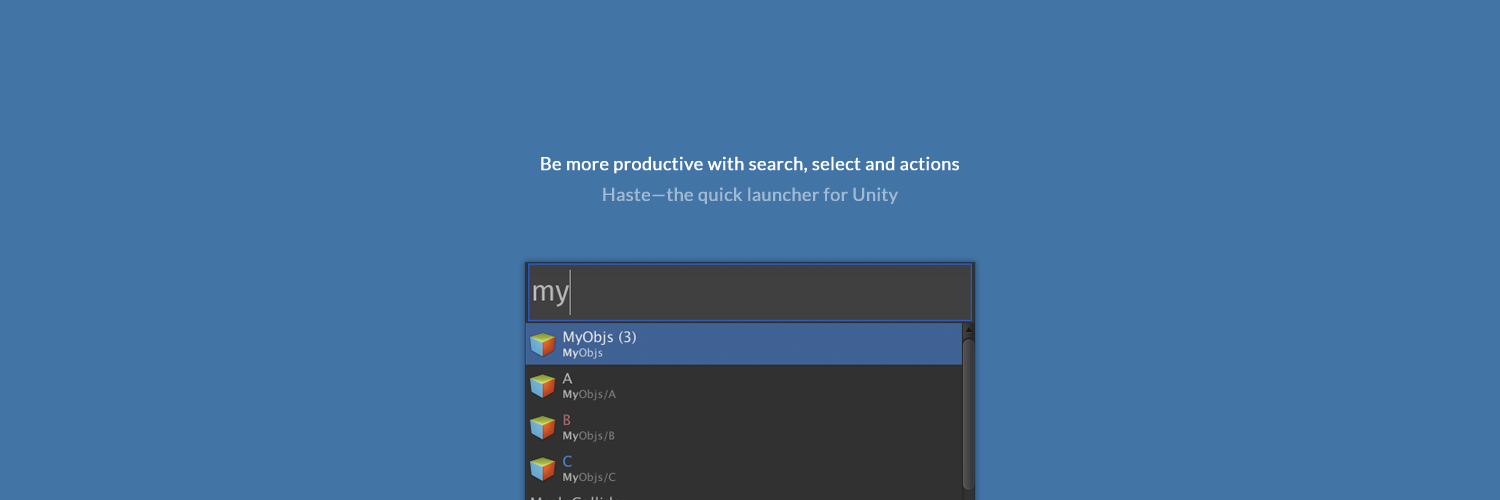
<style>
.page{position:relative;width:1500px;height:500px;background:#4274a6}
.page>*{position:absolute;margin:0}
.t1{font:18px "Lato-Regular";color:#ffffff;font-weight:bold}
.t2{font:18px "Lato-Regular";color:#a1bad3;font-weight:bold}
</style>
<div class="page">
<p class="t1" style="left:541px;top:156px;width:418px;height:18px">Be more productive with search, select and actions</p>
<p class="t2" style="left:603px;top:187px;width:295px;height:17px">Haste—the quick launcher for Unity</p>
</div>
